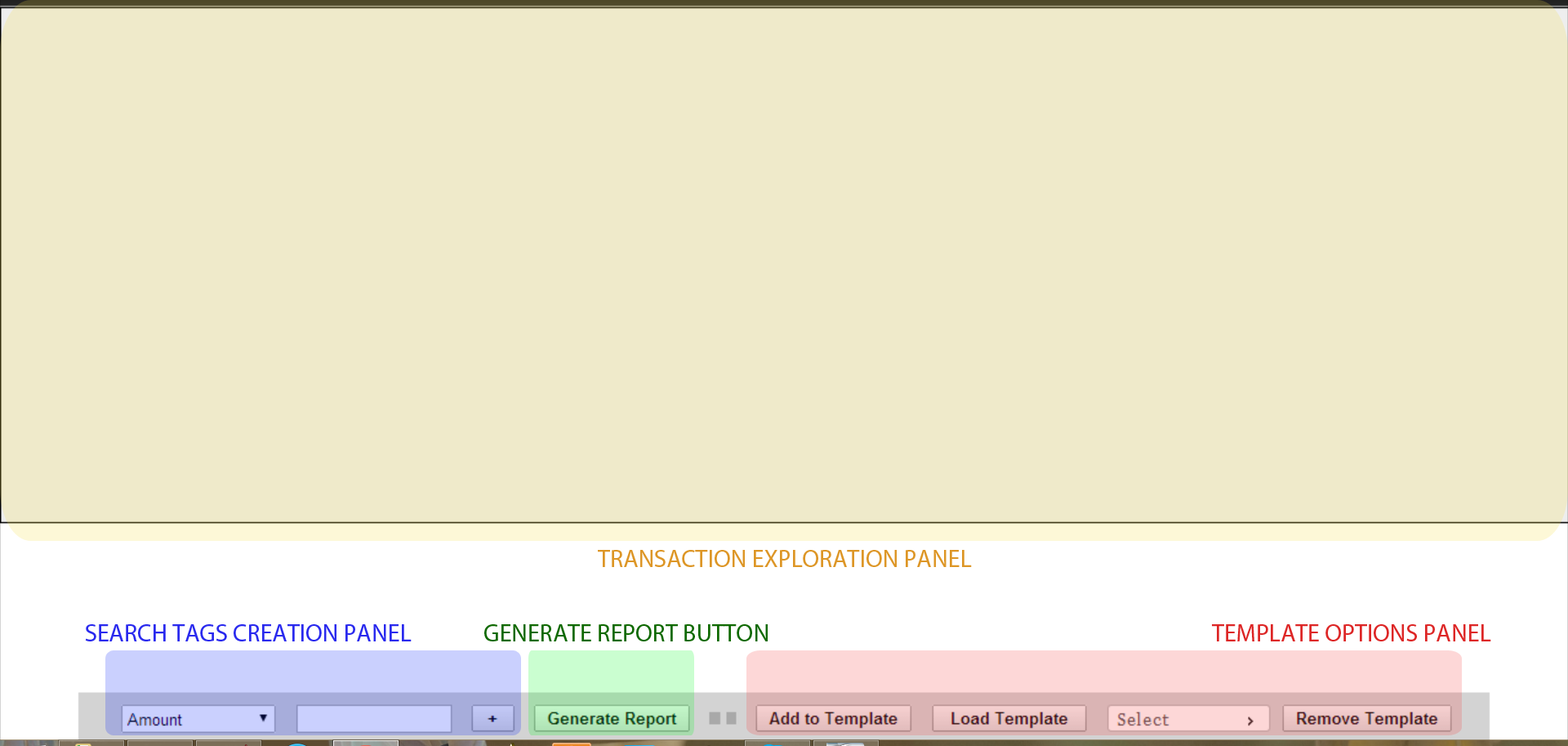
<style>
.page{position:relative;width:1568px;height:746px;background:#efeaca}
.page>*{position:absolute;margin:0}
.t1{font:24.5px "MyriadPro-Regular";color:#dd9626}
.t2{font:24.5px "MyriadPro-Regular";color:#2929ee}
.t3{font:24.5px "MyriadPro-Regular";color:#0f6900}
.t4{font:24.5px "MyriadPro-Regular";color:#dd2626}
</style>
<div class="page">
<p class="t1" style="left:598px;top:550px;width:374px;height:17px">TRANSACTION EXPLORATION PANEL</p>
<p class="t2" style="left:85px;top:624px;width:327px;height:17px">SEARCH TAGS CREATION PANEL</p>
<p class="t3" style="left:484px;top:624px;width:284px;height:17px">GENERATE REPORT BUTTON</p>
<p class="t4" style="left:1212px;top:624px;width:279px;height:17px">TEMPLATE OPTIONS PANEL</p>
</div>
